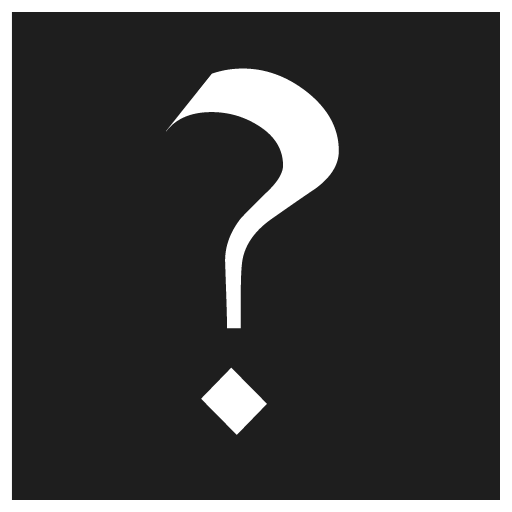
<style>
.page{position:relative;width:512px;height:512px;background:#1e1e1e}
.page>*{position:absolute;margin:0}
.t1{font:428px "OPENCLASSIC";color:#ffffff}
</style>
<div class="page">
<p class="t1" style="left:166px;top:68px;width:173px;height:367px">?</p>
</div>
